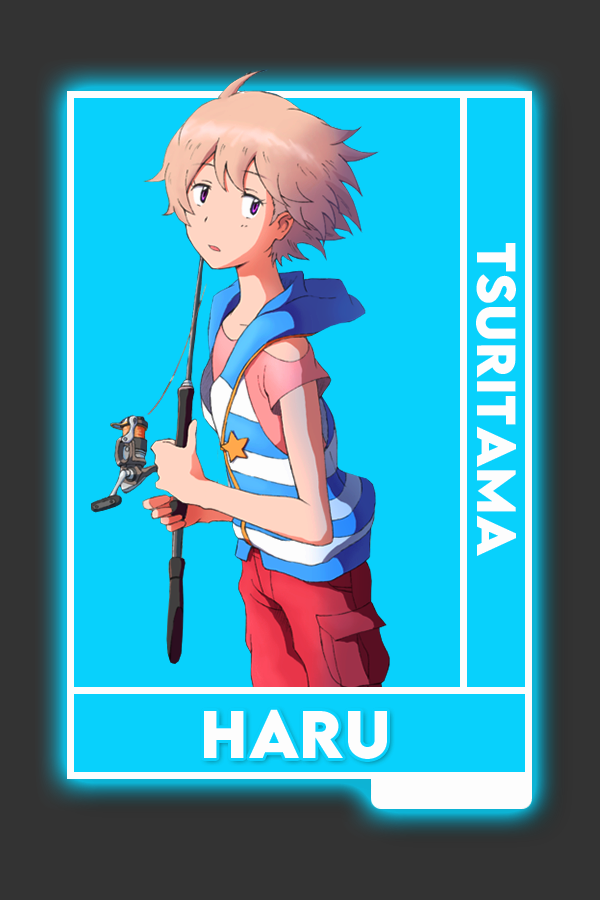
<style>
.page{position:relative;width:600px;height:900px;background:#08d1fc}
.page>*{position:absolute;margin:0}
.t1{font:48.8px "LEMONMILK-Bold";color:#ffffff}
.t2{font:60.3px "LEMONMILK-Bold";color:#ffffff}
</style>
<div class="page">
<p class="t1" style="left:476px;top:243px;width:40px;height:313px;rotate:90deg">TSURITAMA</p>
<p class="t2" style="left:204px;top:709px;width:183px;height:50px">HARU</p>
</div>
